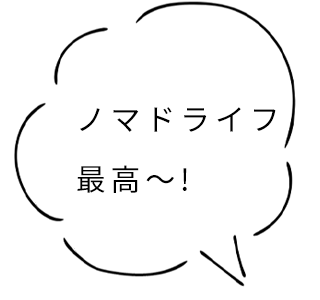
<style>
.page{position:relative;width:320px;height:300px;background:#ffffff}
.page>*{position:absolute;margin:0}
.t1{font:30px/60px "NotoSansCJKjp-Regular";letter-spacing:0.16em;color:#000000}
</style>
<div class="page">
<p class="t1" style="left:77px;top:107px;width:199px;height:86px">ノマドライフ<br>最高〜!</p>
</div>
